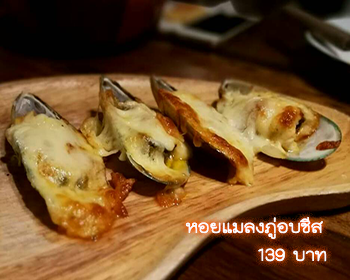
<style>
.page{position:relative;width:350px;height:280px}
.page>*{position:absolute;margin:0}
.t1{font:24px "THKodchasal";color:#ffffff}
</style>
<div class="page">
<p class="t1" style="left:185px;top:217px;width:142px;height:45px;text-align:right">หอยแมลงภู่อบชีส<br>บาท 139</p>
</div>
